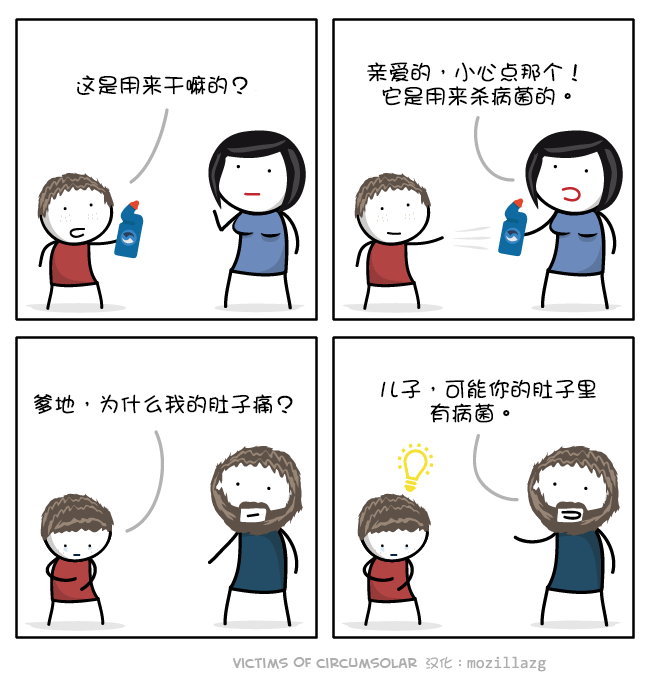
<style>
.page{position:relative;width:650px;height:680px;background:#ffffff}
.page>*{position:absolute;margin:0}
.t1{font:22px/24px "DFGirl";color:#000000}
.t2{font:22px "DFGirl";color:#000000}
</style>
<div class="page">
<p class="t1" style="left:367px;top:62px;width:211px;height:44px">亲爱的，小心点那个！<br>  它是用来杀病菌的。</p>
<p class="t2" style="left:77px;top:75px;width:171px;height:20px">这是用来干嘛的？</p>
<p class="t1" style="left:381px;top:379px;width:215px;height:44px">儿子，可能你的肚子里<br>       有病菌。</p>
<p class="t2" style="left:34px;top:394px;width:259px;height:20px">爹地，为什么我的肚子痛？</p>
</div>
